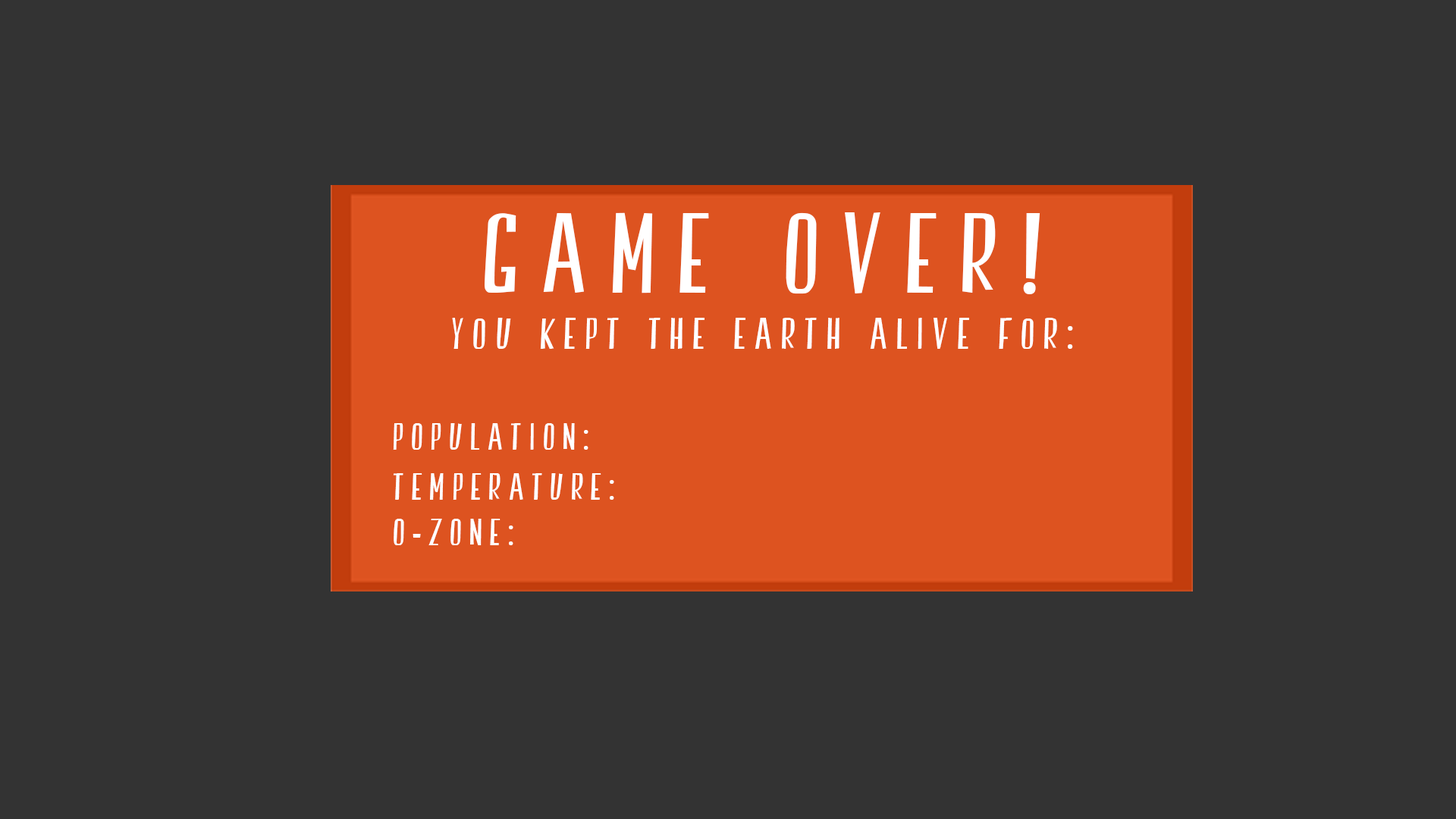
<style>
.page{position:relative;width:1456px;height:819px;background:#333333}
.page>*{position:absolute;margin:0}
.t1{font:113.7px "SwallowFalls";letter-spacing:0.2em;color:#ffffff}
.t2{font:44.2px "SwallowFalls";letter-spacing:0.2em;color:#ffffff}
.t3{font:37.9px "SwallowFalls";letter-spacing:0.2em;color:#ffffff}
</style>
<div class="page">
<p class="t1" style="left:485px;top:212px;width:555px;height:82px">Game Over!</p>
<p class="t2" style="left:452px;top:318px;width:621px;height:31px">you kept the earth alive for:</p>
<p class="t3" style="left:393px;top:423px;width:195px;height:27px">Population:</p>
<p class="t3" style="left:393px;top:473px;width:221px;height:27px">Temperature:</p>
<p class="t3" style="left:394px;top:519px;width:119px;height:26px">o-zone:</p>
</div>
